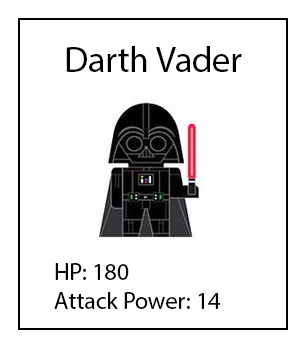
<style>
.page{position:relative;width:306px;height:350px;background:#ffffff}
.page>*{position:absolute;margin:0}
.t1{font:36px "MyriadPro-Regular";color:#000000}
.t2{font:24px "MyriadPro-Regular";color:#000000}
</style>
<div class="page">
<p class="t1" style="left:66px;top:46px;width:176px;height:26px">Darth Vader</p>
<p class="t2" style="left:54px;top:263px;width:167px;height:46px">HP: 180<br>Attack Power: 14</p>
</div>
